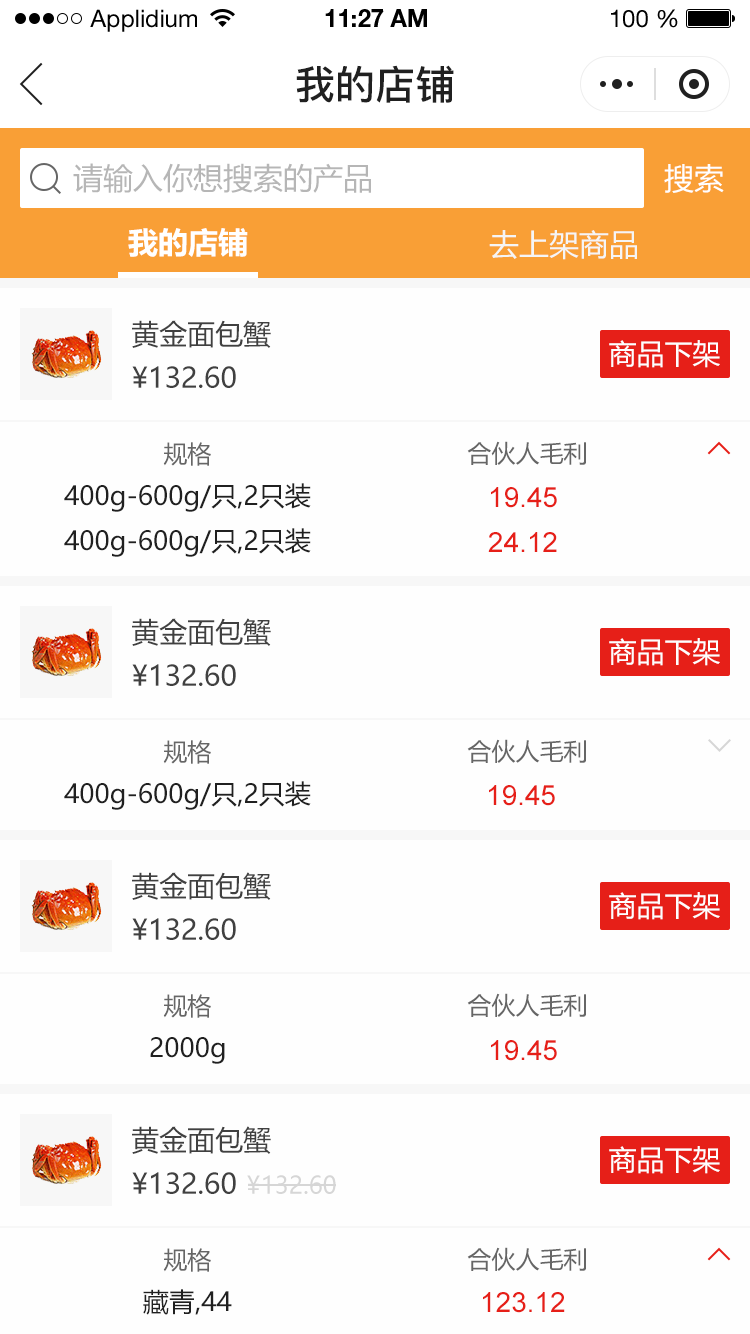
<style>
.page{position:relative;width:750px;height:1334px;background:#fefefe}
.page>*{position:absolute;margin:0}
.t1{font:24px "HelveticaNeueLTStd-Roman";color:#000000}
.t2{font:24px "HelveticaNeueLTStd-Bd";color:#000000}
.t3{font:40px "PingFang-SC-Bold";color:#202020;text-transform:uppercase}
.t4{font:30px "MicrosoftYaHei";color:#b6b6b6;text-transform:uppercase}
.t5{font:30px "MicrosoftYaHei";color:#ffffff;text-transform:uppercase}
.t6{font:30px "MicrosoftYaHei-Bold";color:#ffffff;text-transform:uppercase}
.t7{font:30px "MicrosoftYaHei";color:#f5f5f5;text-transform:uppercase}
.t8{font:28px "MicrosoftYaHei";color:#404040;text-transform:uppercase}
.t9{font:28px "MicrosoftYaHei";color:#fefefe;text-transform:uppercase}
.t10{font:24px "MicrosoftYaHei";color:#666666;text-transform:uppercase}
.t11{font:26px "MicrosoftYaHei";color:#202020}
.t12{font:28px "ArialMT";color:#e61f18}
.t13{font:24px "MicrosoftYaHei";color:#d6d6d6;text-transform:uppercase}
</style>
<div class="page">
<p class="t1" style="left:90px;top:9px;width:107px;height:23px">Applidium</p>
<p class="t2" style="left:325px;top:9px;width:102px;height:18px">11:27 AM</p>
<p class="t1" style="left:611px;top:9px;width:67px;height:19px">100 %</p>
<p class="t3" style="left:296px;top:65px;width:158px;height:38px">我的店铺</p>
<p class="t4" style="left:73px;top:163px;width:298px;height:30px">请输入你想搜索的产品</p>
<p class="t5" style="left:664px;top:164px;width:60px;height:29px">搜索</p>
<p class="t6" style="left:128px;top:228px;width:120px;height:29px">我的店铺</p>
<p class="t7" style="left:489px;top:230px;width:148px;height:30px">去上架商品</p>
<p class="t8" style="left:132px;top:320px;width:139px;height:28px">黄金面包蟹</p>
<p class="t9" style="left:609px;top:340px;width:111px;height:28px">商品下架</p>
<p class="t8" style="left:132px;top:366px;width:104px;height:22px">¥132.60</p>
<p class="t10" style="left:163px;top:442px;width:48px;height:24px">规格</p>
<p class="t10" style="left:467px;top:441px;width:119px;height:24px">合伙人毛利</p>
<p class="t11" style="left:64px;top:483px;width:247px;height:29px">400g-600g/只,2只装</p>
<p class="t12" style="left:491px;top:487px;width:66px;height:21px">19.45</p>
<p class="t11" style="left:64px;top:528px;width:247px;height:29px">400g-600g/只,2只装</p>
<p class="t12" style="left:488px;top:532px;width:69px;height:20px">24.12</p>
<p class="t8" style="left:132px;top:618px;width:139px;height:28px">黄金面包蟹</p>
<p class="t9" style="left:609px;top:638px;width:111px;height:28px">商品下架</p>
<p class="t8" style="left:132px;top:664px;width:104px;height:22px">¥132.60</p>
<p class="t10" style="left:163px;top:740px;width:48px;height:24px">规格</p>
<p class="t10" style="left:467px;top:739px;width:119px;height:24px">合伙人毛利</p>
<p class="t11" style="left:64px;top:781px;width:247px;height:29px">400g-600g/只,2只装</p>
<p class="t12" style="left:489px;top:785px;width:66px;height:21px">19.45</p>
<p class="t8" style="left:132px;top:872px;width:139px;height:28px">黄金面包蟹</p>
<p class="t9" style="left:609px;top:892px;width:111px;height:28px">商品下架</p>
<p class="t8" style="left:132px;top:918px;width:104px;height:22px">¥132.60</p>
<p class="t10" style="left:163px;top:994px;width:48px;height:24px">规格</p>
<p class="t10" style="left:467px;top:993px;width:119px;height:24px">合伙人毛利</p>
<p class="t11" style="left:150px;top:1037px;width:75px;height:27px">2000g</p>
<p class="t12" style="left:491px;top:1040px;width:66px;height:21px">19.45</p>
<p class="t8" style="left:132px;top:1126px;width:139px;height:28px">黄金面包蟹</p>
<p class="t9" style="left:609px;top:1146px;width:111px;height:28px">商品下架</p>
<p class="t8" style="left:132px;top:1172px;width:104px;height:22px">¥132.60</p>
<p class="t13" style="left:247px;top:1175px;width:89px;height:19px">¥132.60</p>
<p class="t10" style="left:163px;top:1248px;width:48px;height:24px">规格</p>
<p class="t10" style="left:467px;top:1247px;width:119px;height:24px">合伙人毛利</p>
<p class="t11" style="left:143px;top:1289px;width:89px;height:26px">藏青,44</p>
<p class="t12" style="left:483px;top:1292px;width:82px;height:21px">123.12</p>
</div>
